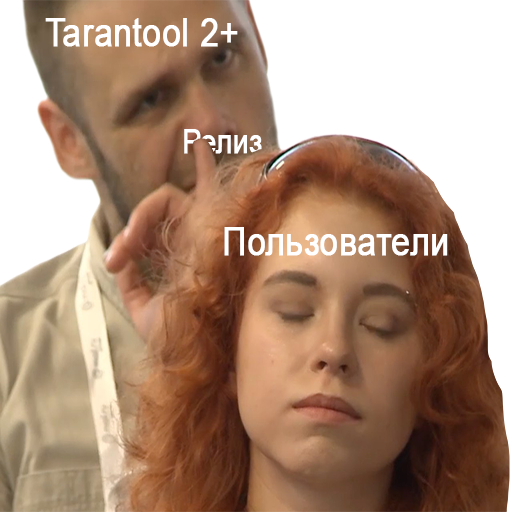
<style>
.page{position:relative;width:512px;height:512px;background:#ffffff}
.page>*{position:absolute;margin:0}
.t1{font:38.8px "ArialMT";color:#ffffff;font-weight:bold;scale:0.86 1}
.t2{font:32.7px "ArialMT";color:#ffffff;font-weight:bold;scale:0.86 1}
</style>
<div class="page">
<p class="t1" style="left:45px;top:18px;width:193px;height:29px">Tarantool 2+</p>
<p class="t2" style="left:184px;top:129px;width:78px;height:25px">Релиз</p>
<p class="t1" style="left:224px;top:227px;width:224px;height:29px">Пользователи</p>
</div>
